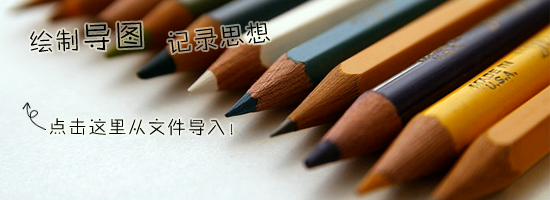
<style>
.page{position:relative;width:550px;height:200px}
.page>*{position:absolute;margin:0}
.t1{font:24px "FZZHYJW--GB1-0";letter-spacing:0.1em;color:#000000}
.t2{font:30px "FZZHYJW--GB1-0";letter-spacing:0.1em;color:#000000}
.t3{font:18px "FZZHYJW--GB1-0";letter-spacing:0.1em;color:#000000}
</style>
<div class="page">
<p class="t1" style="left:30px;top:22px;width:113px;height:30px;rotate:-3deg">绘制<span class="t2">导图</span></p>
<p class="t1" style="left:168px;top:22px;width:102px;height:32px;rotate:-7deg">记录思想</p>
<p class="t3" style="left:50px;top:118px;width:183px;height:18px">点击这里从文件导入！</p>
</div>
